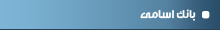
<style>
.page{position:relative;width:220px;height:30px}
.page>*{position:absolute;margin:0}
.t1{font:12px "Mj_Flow-Bold";color:#e7e7e7}
</style>
<div class="page">
<p class="t1" style="left:140px;top:9px;width:56px;height:12px">بانک اسامی</p>
</div>
